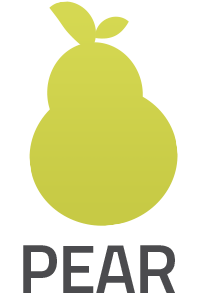
<style>
.page{position:relative;width:200px;height:295px;background:#ffffff}
.page>*{position:absolute;margin:0}
.t1{font:69.1px "Titillium-Semibold";letter-spacing:-0.02em;color:#4b4b4e;text-transform:uppercase}
</style>
<div class="page">
<p class="t1" style="left:23px;top:245px;width:152px;height:48px">Pear</p>
</div>
